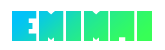
<style>
.page{position:relative;width:165px;height:50px;background:#ffffff}
.page>*{position:absolute;margin:0}
.t1{font:42.7px "Quadratum"}
</style>
<div class="page">
<p class="t1" style="left:12px;top:11px;width:140px;height:30px">Emimai</p>
</div>
